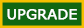
<style>
.page{position:relative;width:84px;height:28px;background:#116712}
.page>*{position:absolute;margin:0}
.t1{font:14px "Verdana";color:#ffffff;font-weight:bold}
</style>
<div class="page">
<p class="t1" style="left:7px;top:9px;width:70px;height:11px">UPGRADE</p>
</div>
